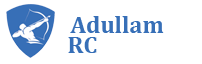
<style>
.page{position:relative;width:202px;height:64px;background:#ffffff}
.page>*{position:absolute;margin:0}
.t1{font:24px "Cambria-Bold";color:#376fb7}
</style>
<div class="page">
<p class="t1" style="left:70px;top:16px;width:94px;height:17px">Adullam</p>
<p class="t1" style="left:68px;top:37px;width:29px;height:16px">RC</p>
</div>
